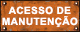
<style>
.page{position:relative;width:80px;height:32px}
.page>*{position:absolute;margin:0}
.t1{font:10px/11px "Arial-BoldMT";letter-spacing:0.04em;color:#ffffff}
</style>
<div class="page">
<p class="t1" style="left:2px;top:6px;width:76px;height:21px;text-align:center">ACESSO DE<br>MANUTENÇÃO</p>
</div>
